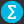
<style>
.page{position:relative;width:24px;height:24px;background:#00b8e4}
.page>*{position:absolute;margin:0}
.t1{font:16.8px "Calibri-Bold";color:#ffffff}
</style>
<div class="page">
<p class="t1" style="left:7px;top:5px;width:9px;height:14px">∑</p>
</div>
